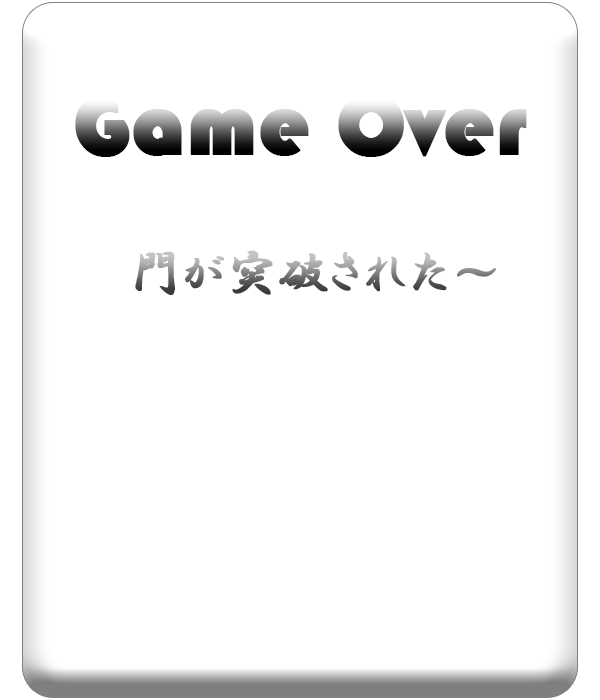
<style>
.page{position:relative;width:600px;height:700px;background:#ffffff}
.page>*{position:absolute;margin:0}
.t1{font:90px "Bauhaus93";font-weight:bold}
.t2{font:50px "HGPGyoshotai";font-weight:bold}
</style>
<div class="page">
<p class="t1" style="left:75px;top:93px;width:452px;height:64px">Game Over</p>
<p class="t2" style="left:135px;top:250px;width:361px;height:45px">門が突破された～</p>
</div>
